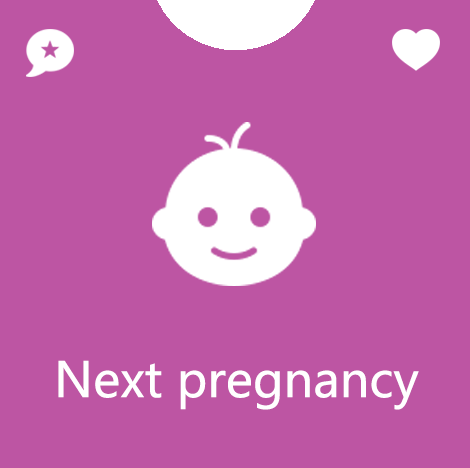
<style>
.page{position:relative;width:470px;height:468px;background:#bd55a3}
.page>*{position:absolute;margin:0}
.t1{font:48px "MicrosoftYaHei";color:#ffffff}
</style>
<div class="page">
<p class="t1" style="left:58px;top:360px;width:361px;height:50px">Next pregnancy</p>
</div>
